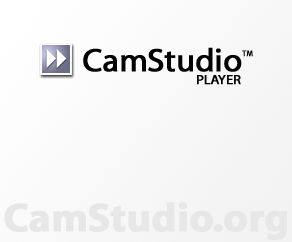
<style>
.page{position:relative;width:292px;height:242px}
.page>*{position:absolute;margin:0}
.t1{font:32.4px "MyriadWebPro";letter-spacing:-0.01em;color:#000000;font-weight:bold}
.t2{font:8.1px "MyriadWebPro";letter-spacing:-0.01em;color:#000000;font-weight:bold}
.t3{font:13.5px "MyriadWebPro";letter-spacing:-0.01em;color:#000000;font-weight:bold}
.t4{font:40.5px "MyriadWebPro-Bold";letter-spacing:-0.01em;color:#e8e7e7;font-weight:bold}
</style>
<div class="page">
<p class="t1" style="left:83px;top:47px;width:159px;height:25px">CamStudio</p>
<p class="t2" style="left:242px;top:50px;width:11px;height:7px">TM</p>
<p class="t3" style="left:197px;top:75px;width:44px;height:10px">PLAYER</p>
<p class="t4" style="left:4px;top:202px;width:284px;height:38px">CamStudio.org</p>
</div>
